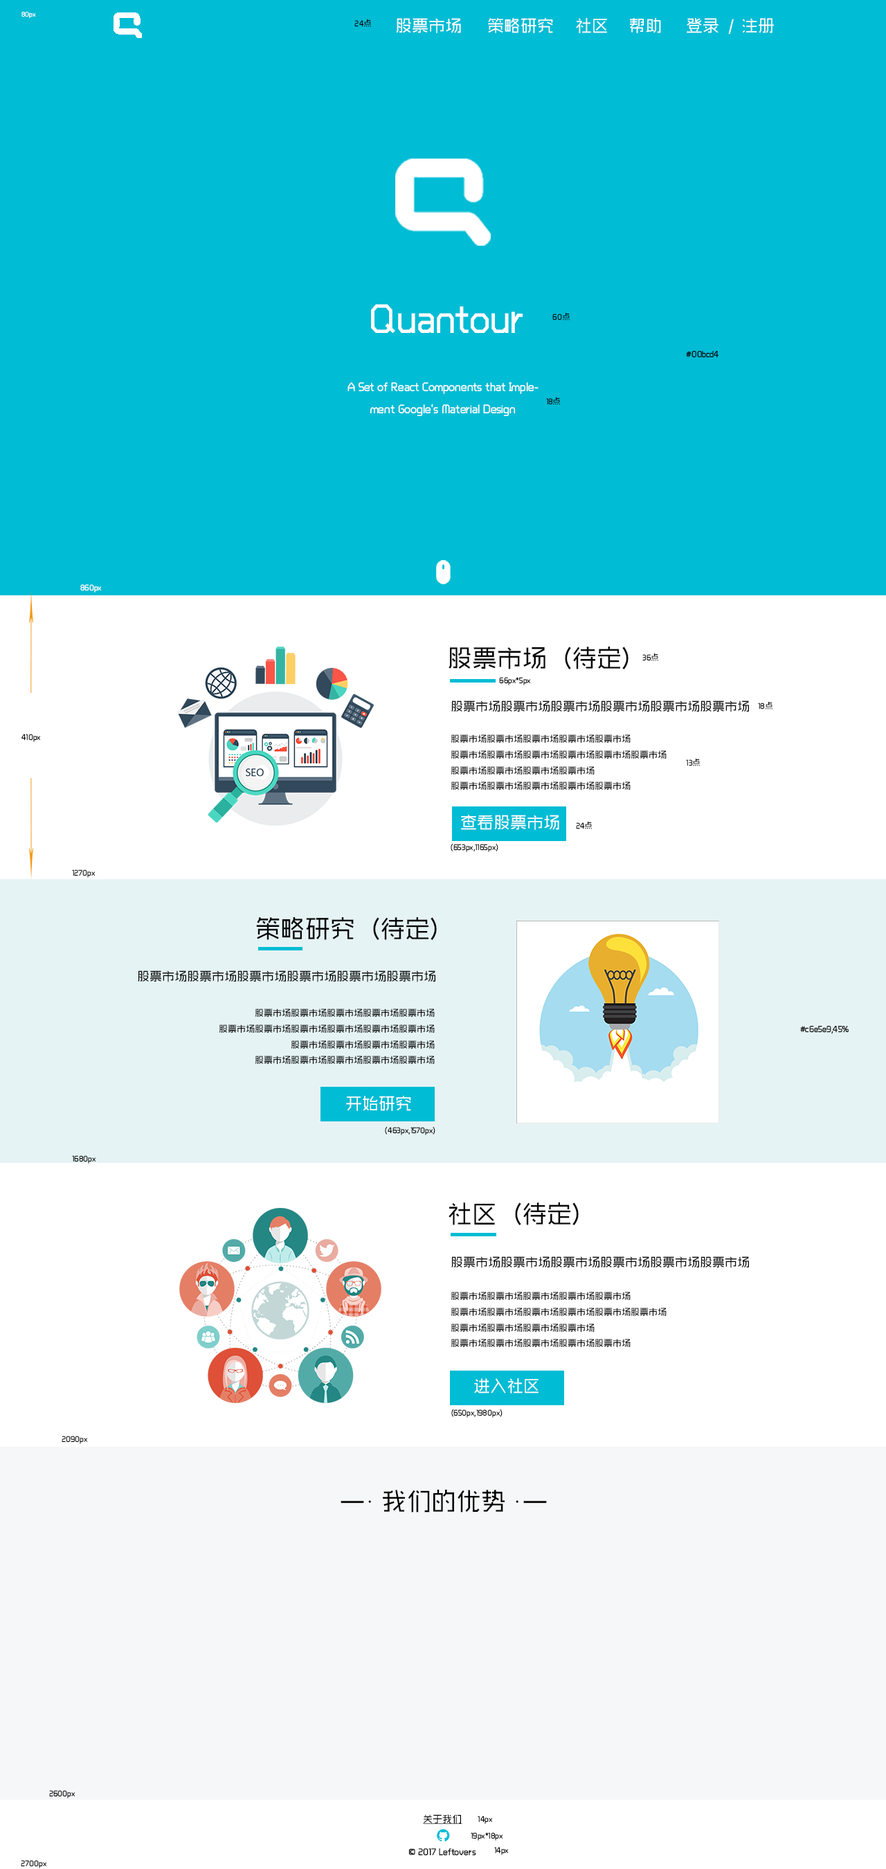
<style>
.page{position:relative;width:886px;height:1869px;background:#ffffff}
.page>*{position:absolute;margin:0}
.t1{font:6.9px "RTWSShangGoG0v1-Regular";color:#ffffff}
.t2{font:8.3px "RTWSShangGoG0v1-Regular";color:#070707}
.t3{font:16.6px "RTWSShangGoG0v1-Regular";color:#ffffff}
.t4{font:41.5px "RTWSShangGoG0v1-Regular";color:#ffffff}
.t5{font:9px "RTWSShangGoG0v1-Regular";color:#000000}
.t6{font:12.5px "RTWSShangGoG0v1-Regular";color:#ffffff}
.t7{font:8.3px "RTWSShangGoG0v1-Regular";color:#ffffff}
.t8{font:24.9px "RTWSShangGoG0v1-Regular";color:#070707}
.t9{font:12.5px "RTWSShangGoG0v1-Regular";color:#070707}
.t10{font:8.3px "RTWSShangGoG0v1-Regular";color:#030303}
.t11{font:9px "RTWSShangGoG0v1-Regular";color:#070707}
.t12{font:24.9px "RTWSShangGoG0v1-Regular";color:#000000}
.t13{font:8.3px "RTWSShangGoG0v1-Regular";color:#000000}
.t14{font:9.7px "RTWSShangGoG0v1-Regular";color:#000000;text-decoration:underline}
.t15{font:9.7px "RTWSShangGoG0v1-Regular";color:#000000}
</style>
<div class="page">
<p class="t1" style="left:21px;top:12px;width:15px;height:7px">80px</p>
<p class="t2" style="left:354px;top:19px;width:18px;height:8px">24点</p>
<p class="t3" style="left:396px;top:18px;width:65px;height:15px">股票市场</p>
<p class="t3" style="left:488px;top:18px;width:65px;height:15px">策略研究</p>
<p class="t3" style="left:576px;top:18px;width:31px;height:15px">社区</p>
<p class="t3" style="left:630px;top:18px;width:31px;height:15px">帮助</p>
<p class="t3" style="left:687px;top:18px;width:32px;height:15px">登录</p>
<p class="t3" style="left:728px;top:19px;width:6px;height:16px">/</p>
<p class="t3" style="left:742px;top:18px;width:32px;height:15px">注册</p>
<p class="t4" style="left:371px;top:304px;width:152px;height:30px">Quantour</p>
<p class="t2" style="left:552px;top:312px;width:18px;height:9px">60点</p>
<p class="t5" style="left:686px;top:351px;width:33px;height:7px">#00bcd4</p>
<p class="t6" style="left:348px;top:382px;width:191px;height:34px;text-align:center">A Set of React Components that Implement Google's Material Design</p>
<p class="t2" style="left:546px;top:397px;width:15px;height:8px">18点</p>
<p class="t7" style="left:80px;top:584px;width:22px;height:9px">860px</p>
<p class="t8" style="left:449px;top:647px;width:180px;height:22px">股票市场（待定）—</p>
<p class="t2" style="left:642px;top:653px;width:17px;height:8px">36点</p>
<p class="t2" style="left:499px;top:677px;width:32px;height:8px">66px*5px</p>
<p class="t9" style="left:451px;top:701px;width:298px;height:11px">股票市场股票市场股票市场股票市场股票市场股票市场</p>
<p class="t2" style="left:758px;top:701px;width:15px;height:9px">18点</p>
<p class="t10" style="left:21px;top:734px;width:20px;height:8px">410px</p>
<p class="t11" style="left:451px;top:735px;width:216px;height:55px">股票市场股票市场股票市场股票市场股票市场<br>股票市场股票市场股票市场股票市场股票市场股票市场<br>股票市场股票市场股票市场股票市场<br>股票市场股票市场股票市场股票市场股票市场</p>
<p class="t2" style="left:686px;top:758px;width:15px;height:8px">13点</p>
<p class="t3" style="left:461px;top:815px;width:98px;height:15px">查看股票市场</p>
<p class="t2" style="left:576px;top:821px;width:17px;height:8px">24点</p>
<p class="t2" style="left:451px;top:843px;width:47px;height:9px">(653px,1165px)</p>
<p class="t2" style="left:72px;top:870px;width:24px;height:8px">1270px</p>
<p class="t8" style="left:256px;top:917px;width:181px;height:23px">策略研究（待定）</p>
<p class="t9" style="left:138px;top:971px;width:297px;height:11px">股票市场股票市场股票市场股票市场股票市场股票市场</p>
<p class="t11" style="left:219px;top:1009px;width:216px;height:55px;text-align:right">股票市场股票市场股票市场股票市场股票市场<br>股票市场股票市场股票市场股票市场股票市场股票市场<br>股票市场股票市场股票市场股票市场<br>股票市场股票市场股票市场股票市场股票市场</p>
<p class="t5" style="left:800px;top:1025px;width:49px;height:9px">#c6e5e9,45%</p>
<p class="t3" style="left:346px;top:1096px;width:65px;height:15px">开始研究</p>
<p class="t2" style="left:385px;top:1126px;width:50px;height:9px">(463px,1570px)</p>
<p class="t2" style="left:72px;top:1155px;width:24px;height:9px">1680px</p>
<p class="t8" style="left:449px;top:1203px;width:130px;height:22px">社区（待定）</p>
<p class="t9" style="left:451px;top:1257px;width:298px;height:11px">股票市场股票市场股票市场股票市场股票市场股票市场</p>
<p class="t11" style="left:451px;top:1292px;width:216px;height:55px">股票市场股票市场股票市场股票市场股票市场<br>股票市场股票市场股票市场股票市场股票市场股票市场<br>股票市场股票市场股票市场股票市场<br>股票市场股票市场股票市场股票市场股票市场</p>
<p class="t3" style="left:474px;top:1378px;width:65px;height:16px">进入社区</p>
<p class="t2" style="left:451px;top:1409px;width:52px;height:9px">(650px,1980px)</p>
<p class="t2" style="left:62px;top:1436px;width:26px;height:8px">2090px</p>
<p class="t12" style="left:341px;top:1490px;width:206px;height:23px">—· 我们的优势 ·——</p>
<p class="t13" style="left:49px;top:1790px;width:26px;height:9px">2600px</p>
<p class="t14" style="left:423px;top:1815px;width:39px;height:9px">关于我们</p>
<p class="t13" style="left:478px;top:1816px;width:15px;height:8px">14px</p>
<p class="t13" style="left:471px;top:1833px;width:32px;height:8px">19px*18px</p>
<p class="t15" style="left:408px;top:1848px;width:68px;height:8px">© 2017 Leftovers</p>
<p class="t13" style="left:494px;top:1847px;width:15px;height:8px">14px</p>
<p class="t13" style="left:21px;top:1860px;width:26px;height:9px">2700px</p>
</div>
